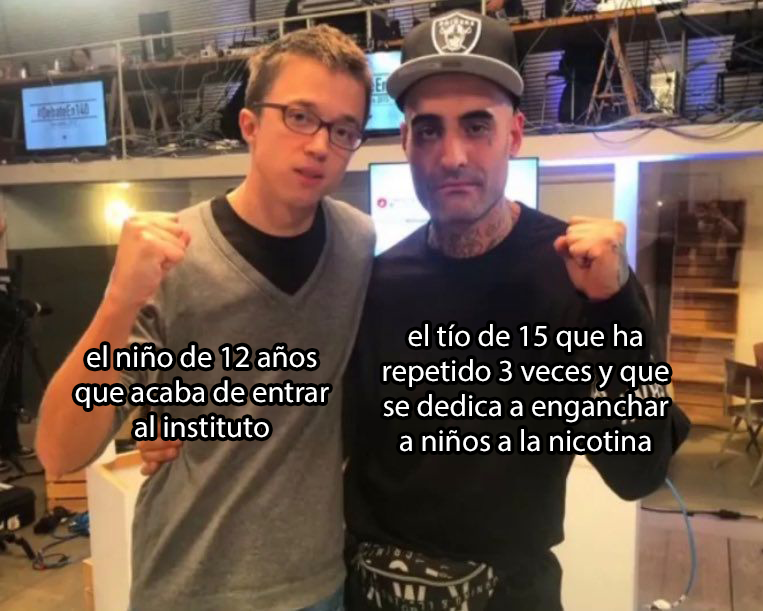
<style>
.page{position:relative;width:763px;height:611px}
.page>*{position:absolute;margin:0}
.t1{font:30.9px "MyriadPro-Regular";color:#ffffff}
.t2{font:30.7px "MyriadPro-Regular";color:#ffffff}
</style>
<div class="page">
<p class="t1" style="left:383px;top:324px;width:286px;height:128px;text-align:center">el tío de 15 que ha<br>repetido 3 veces y que<br>se dedica a enganchar<br>a niños a la nicotina</p>
<p class="t2" style="left:75px;top:345px;width:254px;height:93px;text-align:center">el niño de 12 años<br>que acaba de entrar<br>al instituto</p>
</div>
